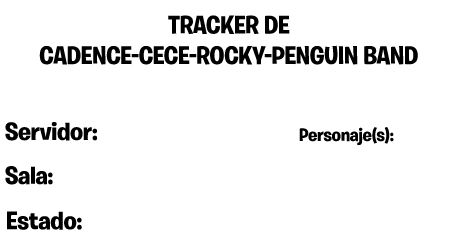
<style>
.page{position:relative;width:449px;height:252px;background:#ffffff}
.page>*{position:absolute;margin:0}
.t1{font:25.4px "BurbankBigRegular-Bold";letter-spacing:-0.01em;color:#000000}
.t2{font:25.1px "BurbankBigRegular-Bold";letter-spacing:-0.01em;color:#000000}
.t3{font:18.3px "BurbankBigRegular-Bold";letter-spacing:-0.01em;color:#000000}
.t4{font:25.3px "BurbankBigRegular-Bold";letter-spacing:-0.01em;color:#000000}
</style>
<div class="page">
<p class="t1" style="left:39px;top:15px;width:379px;height:50px;text-align:center">TRACKER DE CADENCE-CECE-ROCKY-PENGUIN BAND</p>
<p class="t2" style="left:5px;top:122px;width:93px;height:19px">Servidor:</p>
<p class="t3" style="left:299px;top:127px;width:95px;height:19px">Personaje(s):</p>
<p class="t4" style="left:5px;top:166px;width:48px;height:19px">Sala:</p>
<p class="t1" style="left:7px;top:211px;width:75px;height:19px">Estado:</p>
</div>
